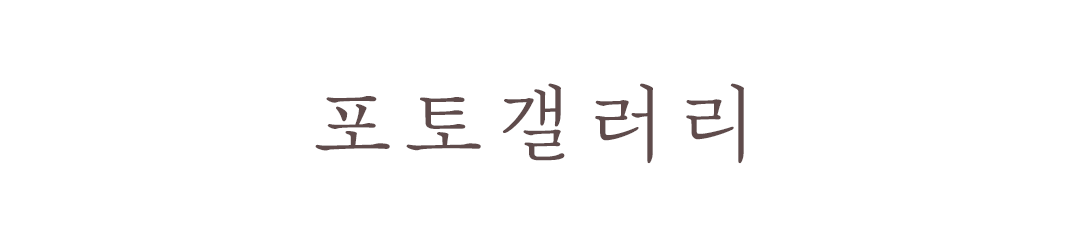
<style>
.page{position:relative;width:1080px;height:246px;background:#ffffff}
.page>*{position:absolute;margin:0}
.t1{font:83.3px "MapoGoldenPier";letter-spacing:0.1em;color:#5f4b4b}
</style>
<div class="page">
<p class="t1" style="left:315px;top:83px;width:429px;height:81px">포토갤러리</p>
</div>
